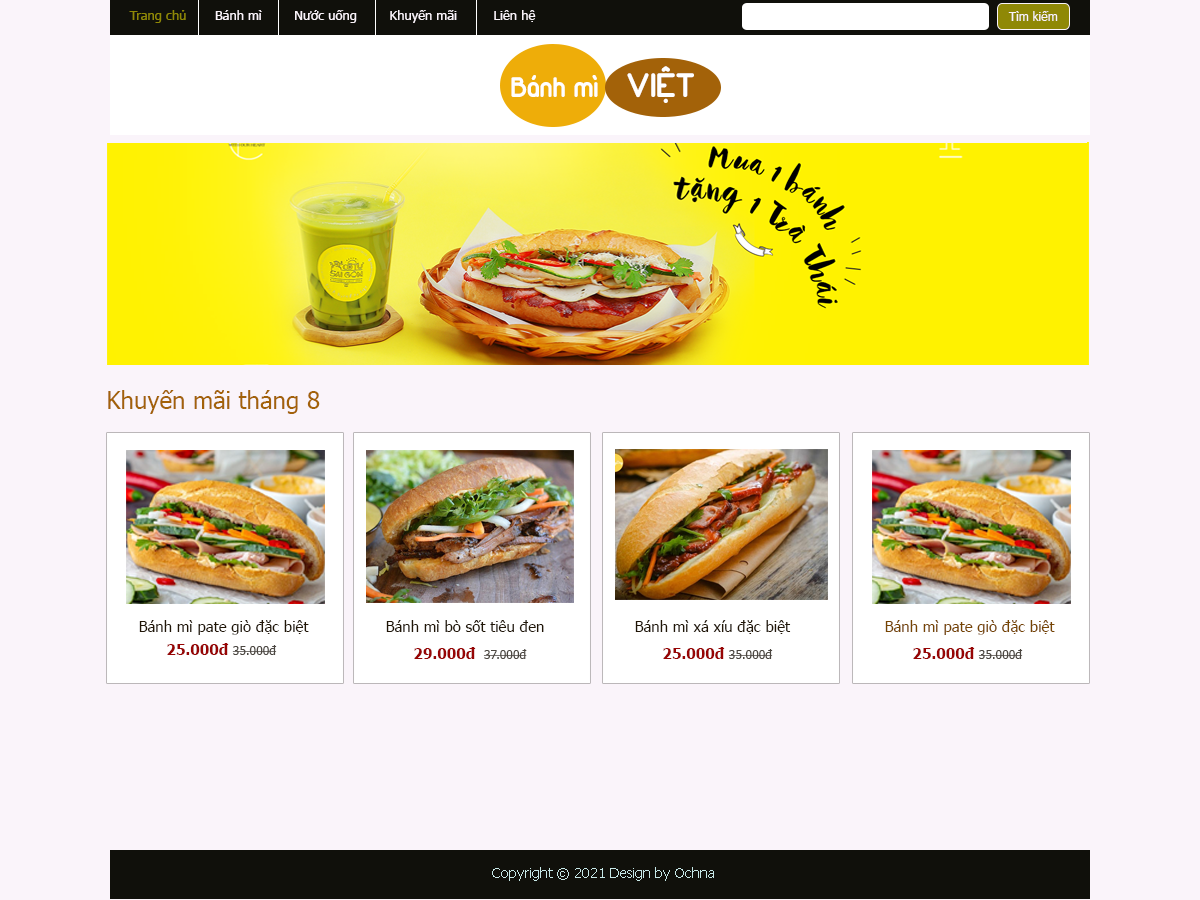
<style>
.page{position:relative;width:1200px;height:900px;background:#faf4fa}
.page>*{position:absolute;margin:0}
.t1{font:13px "Tahoma";color:#faf4fa}
.t2{font:13px "Tahoma";color:#8f8806}
.t3{font:12px "Tahoma";color:#faf4fa}
.t4{font:30px "UTMDuepuntozeroBold";color:#ffffff}
.t5{font:36px "UTMDuepuntozeroBold";color:#ffffff}
.t6{font:24px "Tahoma";color:#a36209}
.t7{font:15px "Tahoma";color:#211607}
.t8{font:15px "Tahoma";color:#774503}
.t9{font:15px "Tahoma-Bold";color:#970505}
.t10{font:12px "Tahoma";color:#4c4741}
.t11{font:14px "Tahoma";color:#c7e8e8}
</style>
<div class="page">
<p class="t1" style="left:129px;top:10px;width:407px;height:13px"><span class="t2">Trang chủ</span>       Bánh mì        Nước uống        Khuyến mãi         Liên hệ</p>
<p class="t3" style="left:1008px;top:11px;width:50px;height:10px">Tìm kiếm</p>
<p class="t4" style="left:511px;top:66px;width:183px;height:37px">Bánh mì<span class="t5">   VIỆT</span></p>
<p class="t6" style="left:108px;top:390px;width:212px;height:24px">Khuyến mãi tháng 8</p>
<p class="t7" style="left:139px;top:620px;width:170px;height:15px">Bánh mì pate giò đặc biệt</p>
<p class="t7" style="left:386px;top:620px;width:158px;height:12px">Bánh mì bò sốt tiêu đen</p>
<p class="t7" style="left:635px;top:620px;width:156px;height:14px">Bánh mì xá xíu đặc biệt</p>
<p class="t8" style="left:885px;top:620px;width:170px;height:15px">Bánh mì pate giò đặc biệt</p>
<p class="t9" style="left:167px;top:643px;width:110px;height:12px">25.000đ <span class="t10">35.000đ</span></p>
<p class="t9" style="left:414px;top:647px;width:113px;height:12px">29.000đ  <span class="t10">37.000đ</span></p>
<p class="t9" style="left:663px;top:647px;width:110px;height:12px">25.000đ <span class="t10">35.000đ</span></p>
<p class="t9" style="left:913px;top:647px;width:110px;height:12px">25.000đ <span class="t10">35.000đ</span></p>
<p class="t11" style="left:492px;top:867px;width:222px;height:14px">Copyright © 2021 Design by Ochna</p>
</div>
